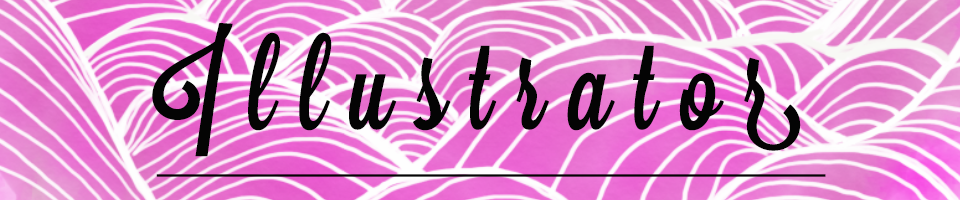
<style>
.page{position:relative;width:960px;height:200px}
.page>*{position:absolute;margin:0}
.t1{font:120px "Lavanderia-Sturdy";letter-spacing:0.2em;color:#040404;text-decoration:underline}
</style>
<div class="page">
<p class="t1" style="left:152px;top:23px;width:674px;height:154px">Illustrator</p>
</div>
